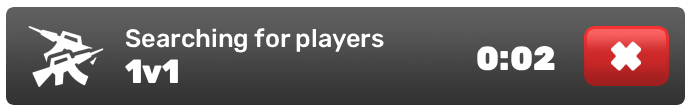
<style>
.page{position:relative;width:692px;height:112px;background:#ffffff}
.page>*{position:absolute;margin:0}
.t1{font:25.3px "RubikLight-Medium";color:#ffffff}
.t2{font:33.5px "RubikLight-Black";color:#ffffff;scale:0.96 1}
.t3{font:33.5px "RubikLight-Black";color:#ffffff;scale:0.95 1}
</style>
<div class="page">
<p class="t1" style="left:125px;top:28px;width:259px;height:25px">Searching for players</p>
<p class="t2" style="left:477px;top:46px;width:78px;height:25px">0:02</p>
<p class="t3" style="left:125px;top:59px;width:53px;height:24px">1v1</p>
</div>
